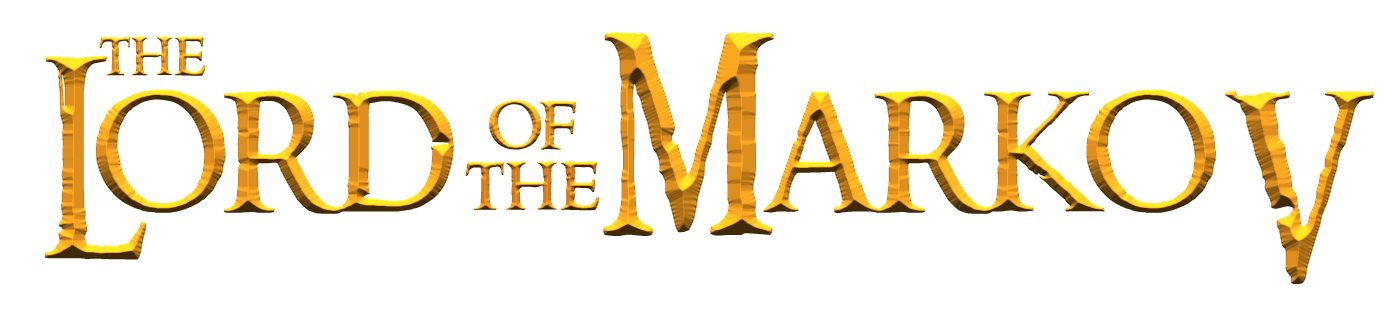
<style>
.page{position:relative;width:1389px;height:334px;background:#ffffff}
.page>*{position:absolute;margin:0}
.t1{font:193.4px "RingbearerMedium";letter-spacing:0.01em}
.t2{font:180.5px "RingbearerMedium";letter-spacing:0.01em}
.t3{font:61.9px "RingbearerMedium";letter-spacing:0.01em}
.t4{font:77.4px/51.6px "RingbearerMedium";letter-spacing:0.01em}
</style>
<div class="page">
<p class="t1" style="left:44px;top:32px;width:1330px;height:252px">Lord   Marko<span class="t2">V</span></p>
<p class="t3" style="left:99px;top:36px;width:107px;height:40px">the</p>
<p class="t4" style="left:465px;top:100px;width:134px;height:111px;text-align:center">of<br>the</p>
</div>
